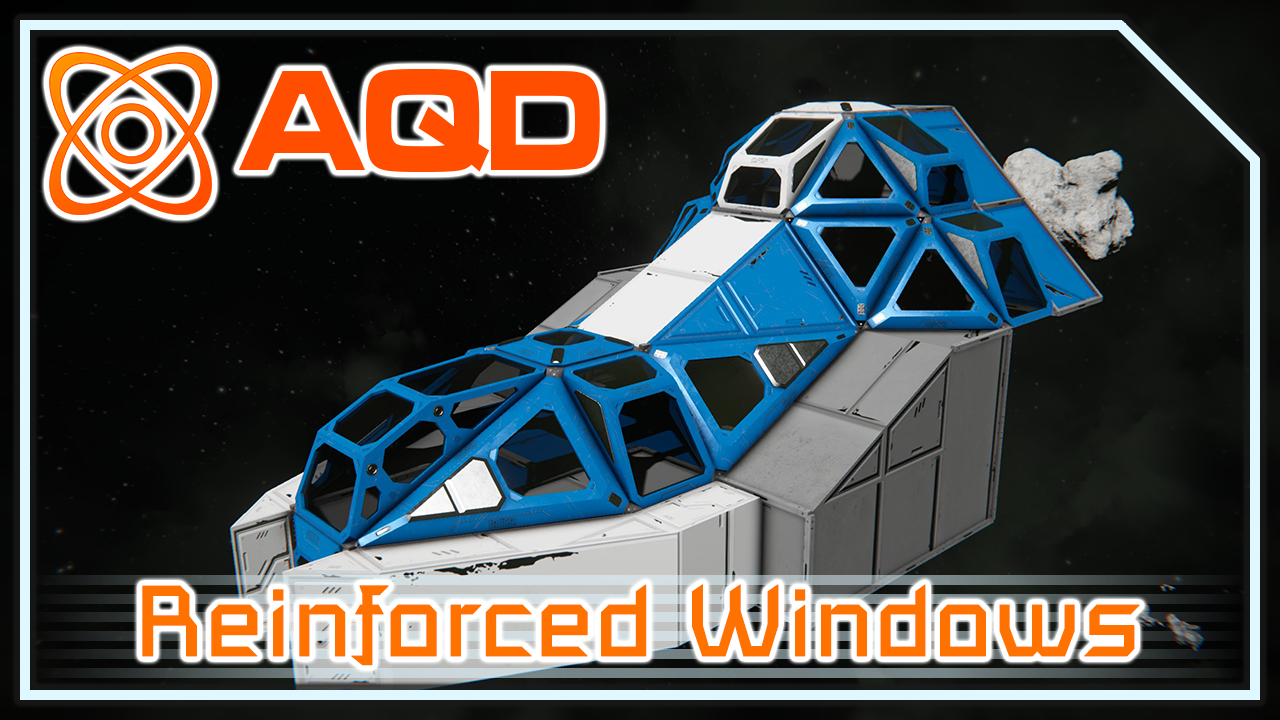
<style>
.page{position:relative;width:1280px;height:720px}
.page>*{position:absolute;margin:0}
.t1{font:148.7px "MicrogrammaD-BoldExte";color:#ff4e00;scale:0.83 1}
.t2{font:99px "SpaceEngineers";color:#ff7200;font-weight:bold}
</style>
<div class="page">
<p class="t1" style="left:238px;top:69px;width:362px;height:104px">AQD</p>
<p class="t2" style="left:142px;top:584px;width:998px;height:82px">Reinforced Windows</p>
</div>
